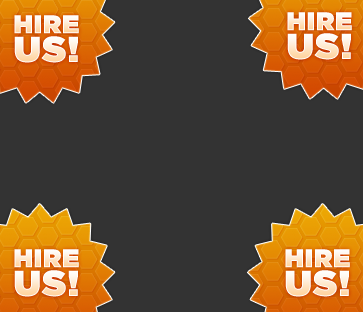
<style>
.page{position:relative;width:363px;height:312px;background:#333333}
.page>*{position:absolute;margin:0}
.t1{font:25.4px "GothamHTF-Ultra";letter-spacing:0.04em;text-transform:uppercase}
.t2{font:35.8px "GothamHTF-Ultra";letter-spacing:0.04em;text-transform:uppercase}
</style>
<div class="page">
<p class="t1" style="left:14px;top:15px;width:65px;height:19px">Hire</p>
<p class="t1" style="left:287px;top:12px;width:65px;height:19px">Hire</p>
<p class="t2" style="left:14px;top:36px;width:64px;height:27px">US!</p>
<p class="t2" style="left:287px;top:33px;width:64px;height:27px">US!</p>
<p class="t1" style="left:14px;top:249px;width:65px;height:19px">Hire</p>
<p class="t1" style="left:285px;top:249px;width:65px;height:19px">Hire</p>
<p class="t2" style="left:14px;top:270px;width:64px;height:27px">US!</p>
<p class="t2" style="left:285px;top:270px;width:64px;height:27px">US!</p>
</div>
